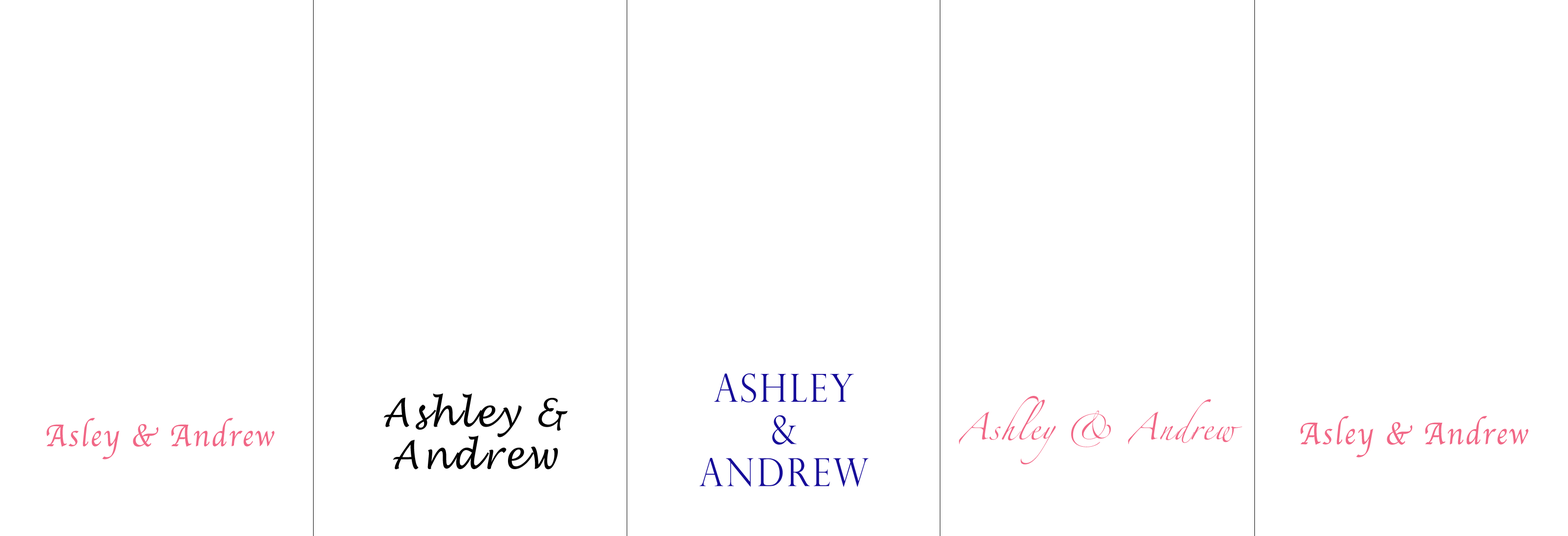
<style>
.page{position:relative;width:1568px;height:536px;background:#ffffff}
.page>*{position:absolute;margin:0}
.t1{font:38.7px "LucidaHandwriting-Italic";letter-spacing:0.07em;color:#000000;scale:0.91 1}
</style>
<div class="page">
<p class="t1" style="left:383px;top:393px;width:185px;height:77px;text-align:center">Ashley &amp;<br>Andrew</p>
</div>
